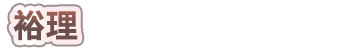
<style>
.page{position:relative;width:360px;height:50px;background:#ffffff}
.page>*{position:absolute;margin:0}
.t1{font:32px "SourceHanSansSC-Bold";font-weight:bold}
</style>
<div class="page">
<p class="t1" style="left:13px;top:9px;width:65px;height:32px">裕理</p>
</div>
